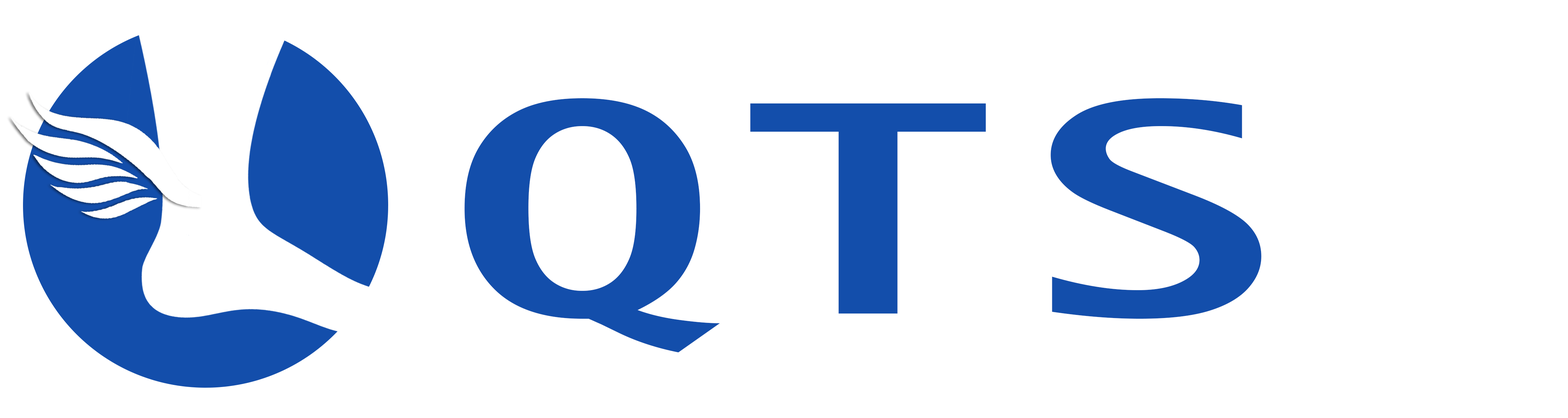
<style>
.page{position:relative;width:1568px;height:418px;background:#ffffff}
.page>*{position:absolute;margin:0}
.t1{font:291.1px "LucidaSans-TypewriterBold";letter-spacing:0.1em;color:#134eab;scale:1.4 1}
</style>
<div class="page">
<p class="t1" style="left:464px;top:98px;width:797px;height:255px">QTS</p>
</div>
